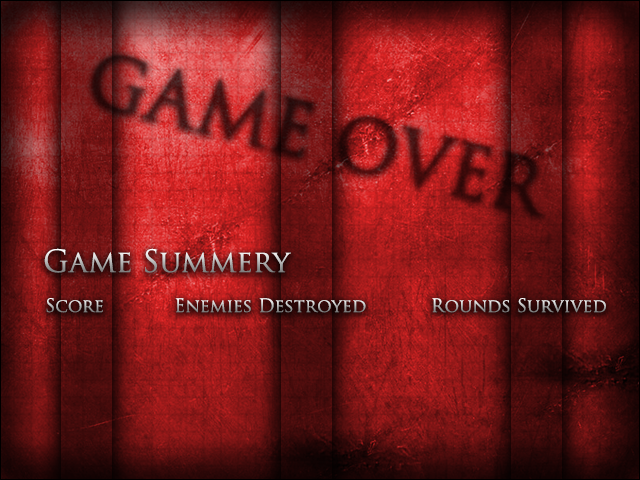
<style>
.page{position:relative;width:640px;height:480px}
.page>*{position:absolute;margin:0}
.t1{font:30px "TrajanPro-Regular"}
.t2{font:18px "TrajanPro-Regular"}
</style>
<div class="page">
<p class="t1" style="left:44px;top:248px;width:247px;height:25px">Game Summery</p>
<p class="t2" style="left:46px;top:298px;width:560px;height:15px">Score            Enemies Destroyed           Rounds Survived</p>
</div>
